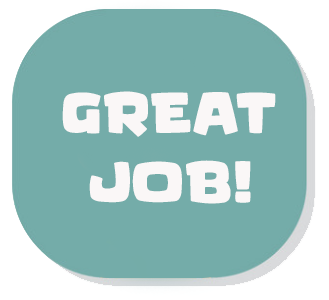
<style>
.page{position:relative;width:329px;height:300px;background:#74aca9}
.page>*{position:absolute;margin:0}
.t1{font:57.3px "KidGames";color:#faf7f7}
</style>
<div class="page">
<p class="t1" style="left:62px;top:91px;width:214px;height:113px;text-align:center">GREAT<br>JOB!</p>
</div>
